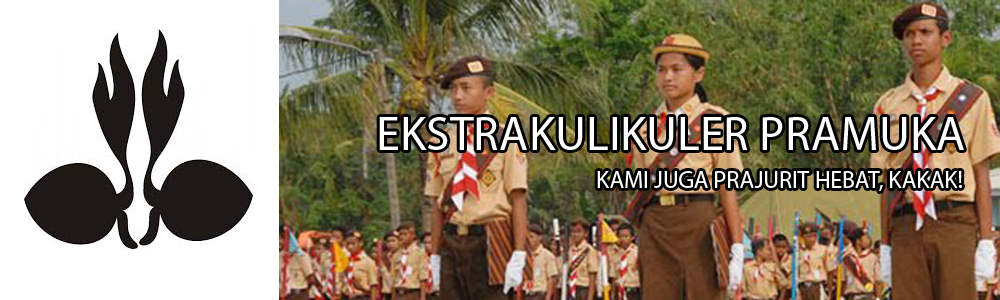
<style>
.page{position:relative;width:1000px;height:300px;background:#ffffff}
.page>*{position:absolute;margin:0}
.t1{font:48px "MyriadPro-Regular";color:#ffffff}
.t2{font:24px "MyriadPro-Regular";color:#ffffff}
</style>
<div class="page">
<p class="t1" style="left:379px;top:117px;width:585px;height:33px">EKSTRAKULIKULER PRAMUKA</p>
<p class="t2" style="left:597px;top:171px;width:365px;height:21px">KAMI JUGA PRAJURIT HEBAT, KAKAK!</p>
</div>
